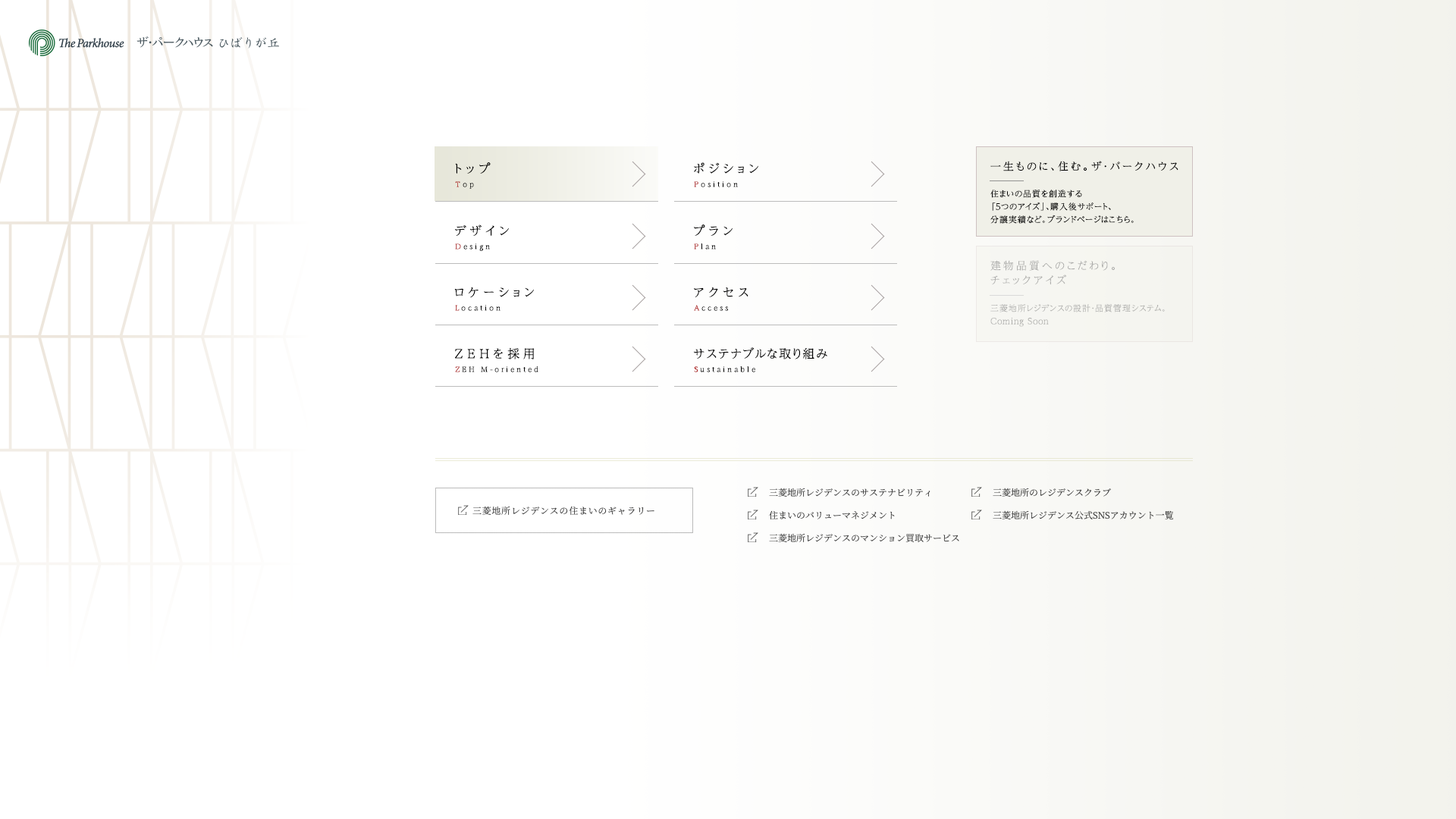
<style>
.page{position:relative;width:1456px;height:819px;background:#ffffff}
.page>*{position:absolute;margin:0}
.t1{font:10.6px "UDReiminPr6N-Light";letter-spacing:0.21em;color:#000000}
.t2{font:12.1px "UDReiminPr6N-Light";letter-spacing:0.33em;color:#000000}
.t3{font:6.8px "UDReiminPr6N-Light";letter-spacing:0.33em;color:#000000}
.t4{font:6.8px "UDReiminPr6N-Light";letter-spacing:0.33em;color:#a90000}
.t5{font:8.3px/12.9px "UDReiminPr6N-Light";letter-spacing:0.05em;color:#000000}
.t6{font:10.6px/14.4px "UDReiminPr6N-Light";letter-spacing:0.21em;color:#aeaeac}
.t7{font:8.3px/12.9px "UDReiminPr6N-Light";letter-spacing:0.05em;color:#adadab}
.t8{font:12.1px "UDReiminPr6N-Light";letter-spacing:0.1em;color:#000000}
</style>
<div class="page">
<p class="t1" style="left:990px;top:161px;width:188px;height:10px">一生ものに、住む。ザ・パークハウス</p>
<p class="t2" style="left:455px;top:162px;width:36px;height:12px">トップ</p>
<p class="t2" style="left:694px;top:162px;width:64px;height:12px">ポジション</p>
<p class="t3" style="left:455px;top:181px;width:19px;height:8px">Top</p>
<p class="t3" style="left:694px;top:181px;width:44px;height:6px"><span class="t4">P</span>osition</p>
<p class="t5" style="left:990px;top:190px;width:144px;height:34px">住まいの品質を創造する<br>「5つのアイズ」、購入後サポート、<br>分譲実績など。ブランドページはこちら。</p>
<p class="t2" style="left:455px;top:224px;width:54px;height:13px">デザイン</p>
<p class="t2" style="left:694px;top:224px;width:39px;height:12px">プラン</p>
<p class="t3" style="left:455px;top:243px;width:35px;height:8px"><span class="t4">D</span>esign</p>
<p class="t3" style="left:694px;top:243px;width:22px;height:6px"><span class="t4">P</span>lan</p>
<p class="t6" style="left:990px;top:260px;width:125px;height:25px">建物品質へのこだわり。<br>チェックアイズ</p>
<p class="t2" style="left:454px;top:287px;width:80px;height:11px">ロケーション</p>
<p class="t2" style="left:694px;top:287px;width:54px;height:10px">アクセス</p>
<p class="t3" style="left:455px;top:305px;width:45px;height:6px"><span class="t4">L</span>ocation</p>
<p class="t3" style="left:694px;top:305px;width:34px;height:6px">Access</p>
<p class="t7" style="left:990px;top:304px;width:175px;height:23px">三菱地所レジデンスの設計・品質管理システム。<br>Coming Soon</p>
<p class="t2" style="left:455px;top:347px;width:80px;height:12px">ZEHを採用</p>
<p class="t8" style="left:694px;top:347px;width:133px;height:12px">サステナブルな取り組み</p>
<p class="t3" style="left:455px;top:366px;width:83px;height:6px"><span class="t4">Z</span>EH M-oriented</p>
<p class="t3" style="left:694px;top:366px;width:61px;height:6px"><span class="t4">S</span>ustainable</p>
</div>
